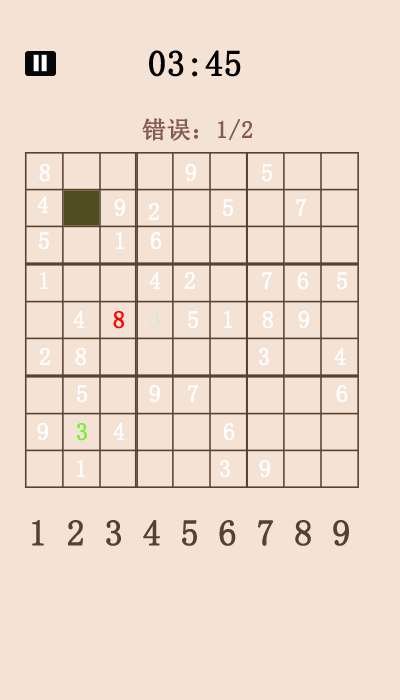
<style>
.page{position:relative;width:400px;height:700px;background:#f4e2d4}
.page>*{position:absolute;margin:0}
.t1{font:36px "SimSun";color:#020202;font-weight:bold}
.t2{font:24px "SimSun";color:#835b53;font-weight:bold}
.t3{font:24px "SimSun";color:#ffffff;font-weight:bold}
.t4{font:24px "SimSun";color:#fa0404;font-weight:bold}
.t5{font:24px "SimSun";color:#e3e3dc;font-weight:bold}
.t6{font:24px "SimSun";color:#76f033;font-weight:bold}
.t7{font:36px "SimSun";color:#564131;font-weight:bold}
</style>
<div class="page">
<p class="t1" style="left:149px;top:50px;width:92px;height:27px">03:45</p>
<p class="t2" style="left:142px;top:118px;width:111px;height:23px">错误：1/2</p>
<p class="t3" style="left:39px;top:164px;width:11px;height:18px">8</p>
<p class="t3" style="left:185px;top:164px;width:12px;height:18px">9</p>
<p class="t3" style="left:262px;top:164px;width:10px;height:18px">5</p>
<p class="t3" style="left:37px;top:196px;width:12px;height:17px">4</p>
<p class="t3" style="left:114px;top:199px;width:12px;height:18px">9</p>
<p class="t3" style="left:148px;top:203px;width:11px;height:17px">2</p>
<p class="t3" style="left:223px;top:199px;width:10px;height:18px">5</p>
<p class="t3" style="left:296px;top:199px;width:10px;height:18px">7</p>
<p class="t3" style="left:39px;top:232px;width:10px;height:18px">5</p>
<p class="t3" style="left:116px;top:231px;width:8px;height:18px">1</p>
<p class="t3" style="left:150px;top:232px;width:12px;height:18px">6</p>
<p class="t3" style="left:40px;top:271px;width:8px;height:18px">1</p>
<p class="t3" style="left:149px;top:272px;width:12px;height:17px">4</p>
<p class="t3" style="left:184px;top:272px;width:11px;height:17px">2</p>
<p class="t3" style="left:262px;top:272px;width:10px;height:18px">7</p>
<p class="t3" style="left:297px;top:272px;width:12px;height:18px">6</p>
<p class="t3" style="left:337px;top:272px;width:10px;height:18px">5</p>
<p class="t3" style="left:73px;top:311px;width:12px;height:17px">4</p>
<p class="t4" style="left:113px;top:311px;width:11px;height:18px">8</p>
<p class="t5" style="left:150px;top:311px;width:10px;height:18px">3</p>
<p class="t3" style="left:188px;top:311px;width:10px;height:18px">5</p>
<p class="t3" style="left:224px;top:310px;width:8px;height:18px">1</p>
<p class="t3" style="left:262px;top:311px;width:11px;height:18px">8</p>
<p class="t3" style="left:298px;top:311px;width:12px;height:18px">9</p>
<p class="t3" style="left:39px;top:348px;width:11px;height:17px">2</p>
<p class="t3" style="left:75px;top:348px;width:11px;height:18px">8</p>
<p class="t3" style="left:259px;top:348px;width:10px;height:18px">3</p>
<p class="t3" style="left:334px;top:348px;width:12px;height:17px">4</p>
<p class="t3" style="left:77px;top:385px;width:10px;height:18px">5</p>
<p class="t3" style="left:149px;top:385px;width:12px;height:18px">9</p>
<p class="t3" style="left:188px;top:385px;width:10px;height:18px">7</p>
<p class="t3" style="left:336px;top:385px;width:12px;height:18px">6</p>
<p class="t3" style="left:37px;top:423px;width:12px;height:18px">9</p>
<p class="t6" style="left:77px;top:423px;width:10px;height:18px">3</p>
<p class="t3" style="left:113px;top:423px;width:12px;height:17px">4</p>
<p class="t3" style="left:223px;top:423px;width:12px;height:18px">6</p>
<p class="t3" style="left:77px;top:459px;width:8px;height:18px">1</p>
<p class="t3" style="left:220px;top:460px;width:10px;height:18px">3</p>
<p class="t3" style="left:259px;top:460px;width:12px;height:18px">9</p>
<p class="t7" style="left:32px;top:520px;width:317px;height:26px">1 2 3 4 5 6 7 8 9</p>
</div>
